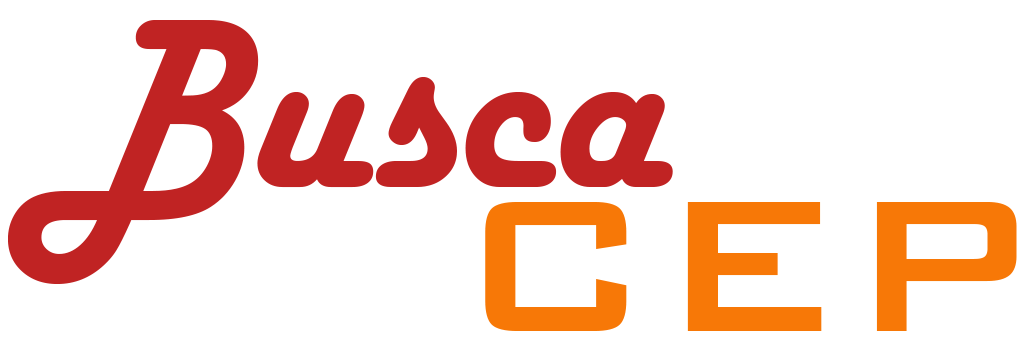
<style>
.page{position:relative;width:1024px;height:350px;background:#ffffff}
.page>*{position:absolute;margin:0}
.t1{font:250px "HarlowSolid";color:#c02323}
.t2{font:250px "BankGothicBT-Medium";color:#f77807}
</style>
<div class="page">
<p class="t1" style="left:8px;top:20px;width:665px;height:264px">Busca</p>
<p class="t2" style="left:485px;top:202px;width:532px;height:129px">CEP</p>
</div>
